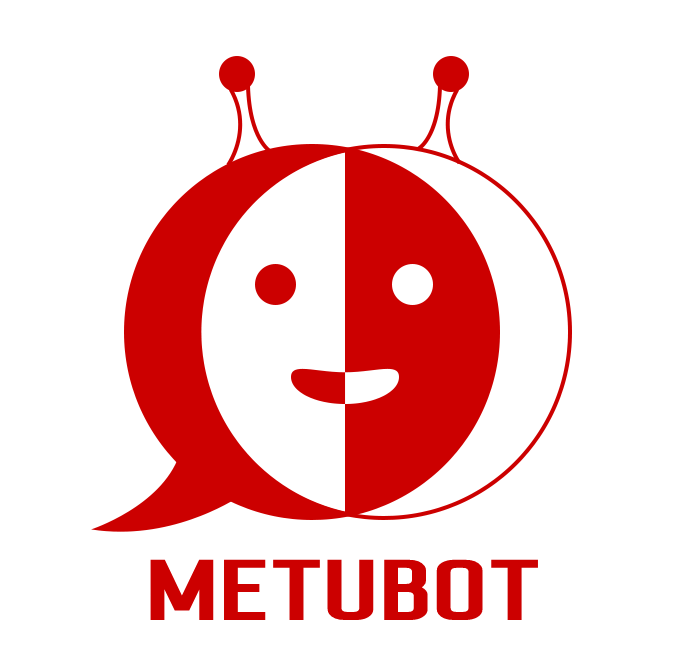
<style>
.page{position:relative;width:688px;height:664px;background:#ffffff}
.page>*{position:absolute;margin:0}
.t1{font:125px "Dhurjati";color:#cc0000}
</style>
<div class="page">
<p class="t1" style="left:150px;top:559px;width:388px;height:61px">METUBOT</p>
</div>
